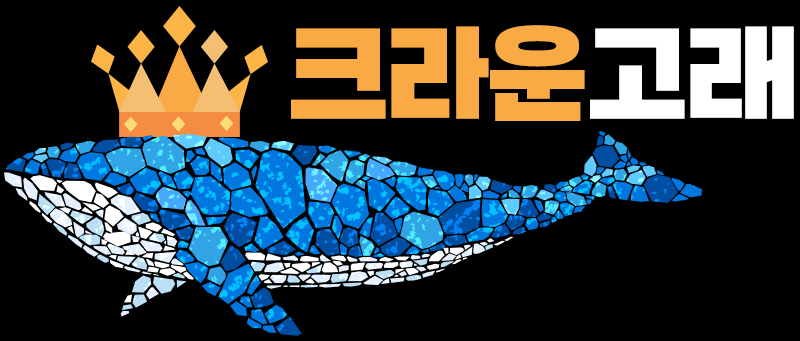
<style>
.page{position:relative;width:800px;height:341px;background:#000000}
.page>*{position:absolute;margin:0}
.t1{font:108.9px "SBAggroB";letter-spacing:-0.045em;color:#f9aa44}
.t2{font:108.9px "SBAggroB";letter-spacing:-0.045em;color:#ffffff}
</style>
<div class="page">
<p class="t1" style="left:291px;top:25px;width:503px;height:96px">크라운<span class="t2">고래</span></p>
</div>
